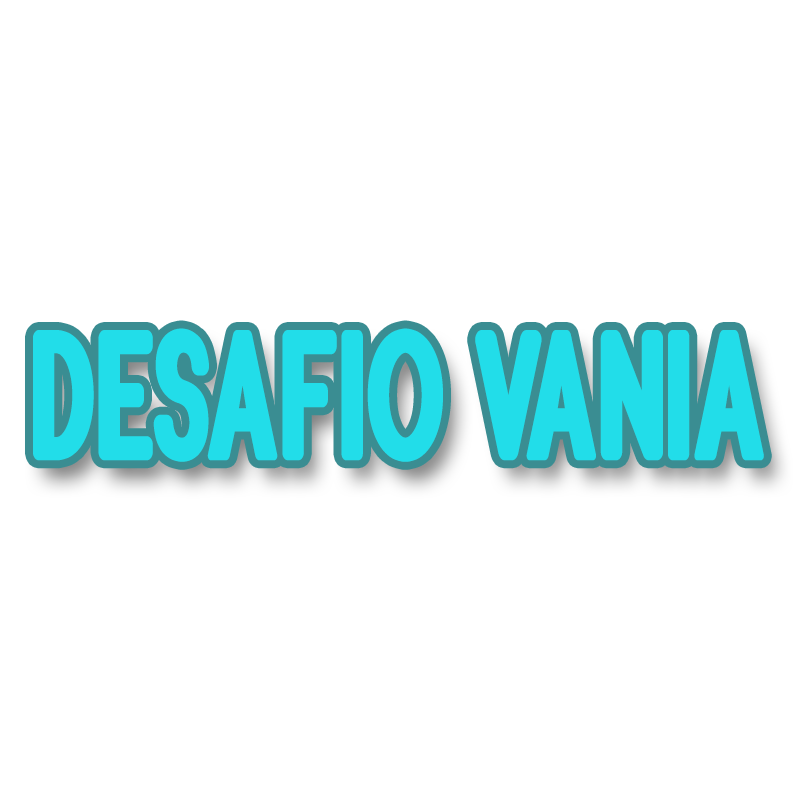
<style>
.page{position:relative;width:800px;height:800px;background:#ffffff}
.page>*{position:absolute;margin:0}
.t1{font:185.1px "WinterHunt";color:#22dde9;scale:0.7 1}
</style>
<div class="page">
<p class="t1" style="left:33px;top:328px;width:731px;height:134px">desafio vania</p>
</div>
